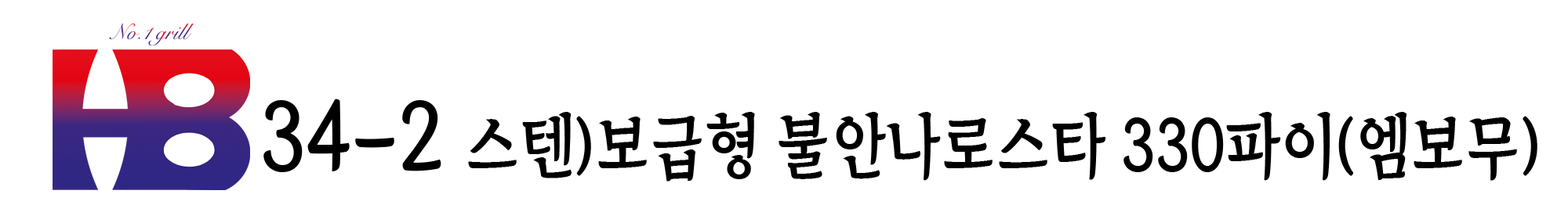
<style>
.page{position:relative;width:1568px;height:205px;background:#ffffff}
.page>*{position:absolute;margin:0}
.t1{font:70.6px "TheIndependenceHallofKorea-Regular";color:#000000;scale:0.89 1}
.t2{font:93.7px "TheIndependenceHallofKorea-Regular";color:#000000;scale:0.89 1}
</style>
<div class="page">
<p class="t1" style="left:263px;top:99px;width:1274px;height:83px"><span class="t2">34-2 </span>스텐)보급형 불안나로스타 330파이(엠보무)</p>
</div>
